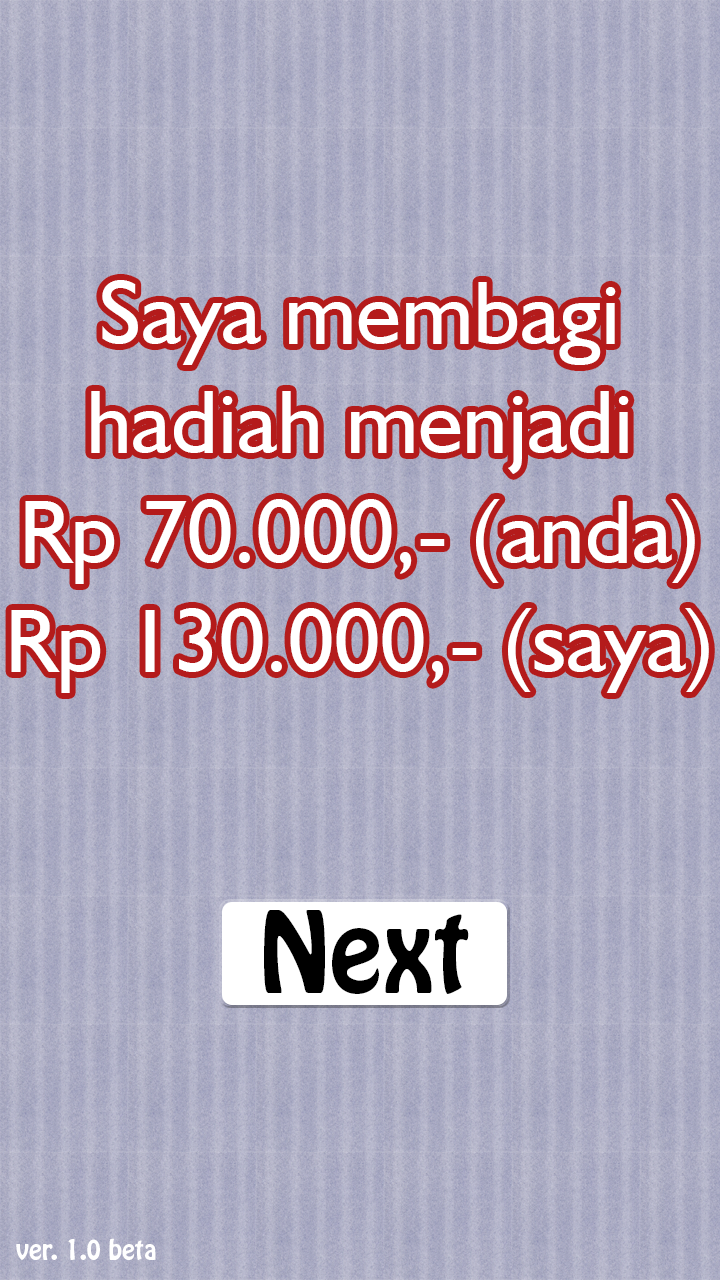
<style>
.page{position:relative;width:720px;height:1280px}
.page>*{position:absolute;margin:0}
.t1{font:91.2px "Humanist521BT-Roman";color:#ffffff}
.t2{font:100px "HoboStd";color:#000000}
.t3{font:25px "HoboStd";color:#ffffff}
</style>
<div class="page">
<p class="t1" style="left:11px;top:280px;width:698px;height:413px;text-align:center">Saya membagi<br>hadiah menjadi<br>Rp 70.000,- (anda)<br>Rp 130.000,- (saya)</p>
<p class="t2" style="left:264px;top:910px;width:205px;height:84px">Next</p>
<p class="t3" style="left:16px;top:1238px;width:140px;height:22px">ver. 1.0 beta</p>
</div>
